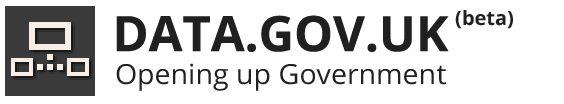
<style>
.page{position:relative;width:564px;height:104px;background:#ffffff}
.page>*{position:absolute;margin:0}
.t1{font:49px "OpenSans-Bold";color:#212121}
.t2{font:19.7px "OpenSans-Bold";color:#212121}
.t3{font:27.9px "OpenSans";color:#212121}
</style>
<div class="page">
<p class="t1" style="left:116px;top:15px;width:333px;height:37px">DATA.GOV.UK</p>
<p class="t2" style="left:455px;top:10px;width:58px;height:19px">(beta)</p>
<p class="t3" style="left:116px;top:63px;width:330px;height:28px">Opening up Government</p>
</div>
